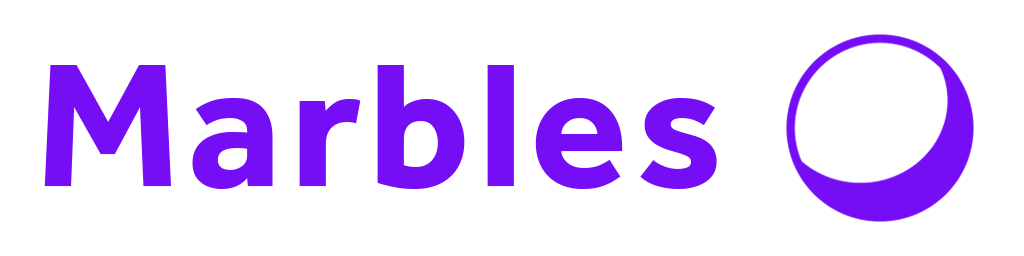
<style>
.page{position:relative;width:1024px;height:256px;background:#ffffff}
.page>*{position:absolute;margin:0}
.t1{font:182px "Effra-Bold";letter-spacing:0.04em;color:#750ef5}
</style>
<div class="page">
<p class="t1" style="left:44px;top:65px;width:673px;height:124px">Marbles</p>
</div>
